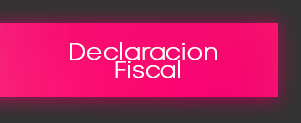
<style>
.page{position:relative;width:301px;height:123px}
.page>*{position:absolute;margin:0}
.t1{font:24px/18px "Mont-ExtraLightDEMO";color:#ffffff;font-weight:bold}
</style>
<div class="page">
<p class="t1" style="left:70px;top:42px;width:147px;height:36px;text-align:center">Declaracion <br>Fiscal</p>
</div>
